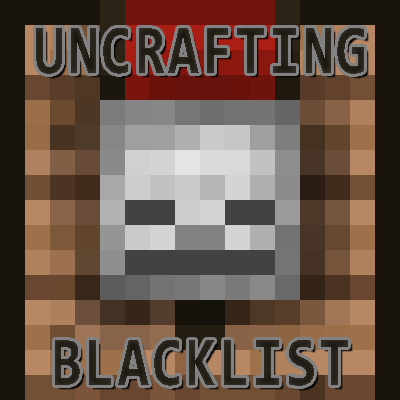
<style>
.page{position:relative;width:400px;height:400px}
.page>*{position:absolute;margin:0}
.t1{font:70px "Consolas-Bold";letter-spacing:0.05em;color:#19140c;scale:0.8 1}
</style>
<div class="page">
<p class="t1" style="left:36px;top:28px;width:328px;height:46px">UNCRAFTING</p>
<p class="t1" style="left:55px;top:340px;width:293px;height:46px">BLACKLIST</p>
</div>
